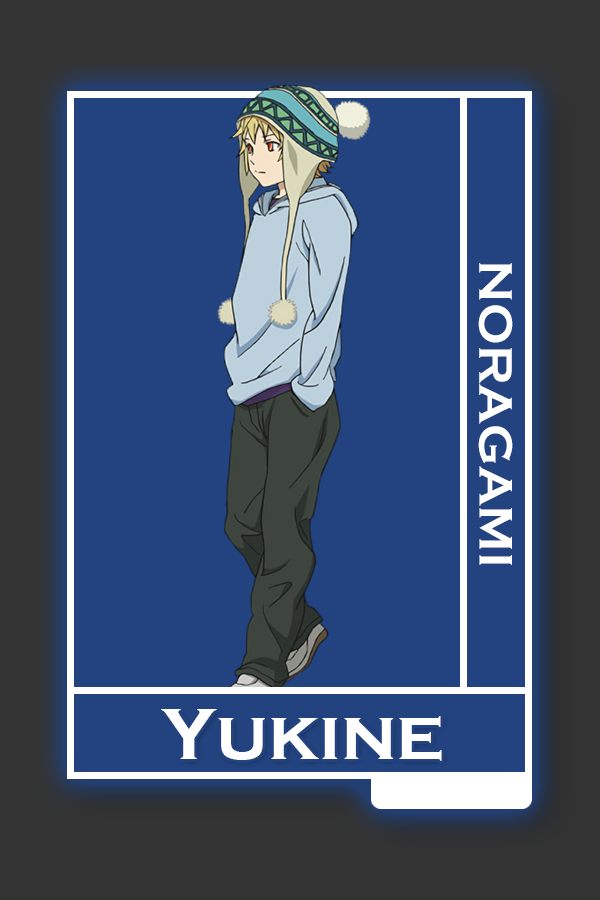
<style>
.page{position:relative;width:600px;height:900px;background:#22437f}
.page>*{position:absolute;margin:0}
.t1{font:48.8px "CopperplateGothic-Bold";color:#ffffff}
.t2{font:75px "CopperplateGothic-Bold";color:#ffffff}
</style>
<div class="page">
<p class="t1" style="left:478px;top:263px;width:35px;height:302px;rotate:90deg">NORAGAMI</p>
<p class="t2" style="left:161px;top:709px;width:281px;height:52px">Yukine</p>
</div>
